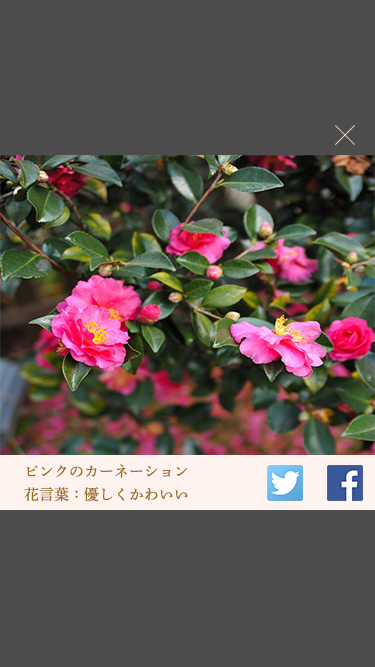
<style>
.page{position:relative;width:375px;height:667px;background:#4c4c4c}
.page>*{position:absolute;margin:0}
.t1{font:15px "ShueiMinPro-M";color:#9b6e23}
</style>
<div class="page">
<p class="t1" style="left:26px;top:464px;width:162px;height:14px">ピンクのカーネーション</p>
<p class="t1" style="left:24px;top:487px;width:164px;height:15px">花言葉：優しくかわいい</p>
</div>
